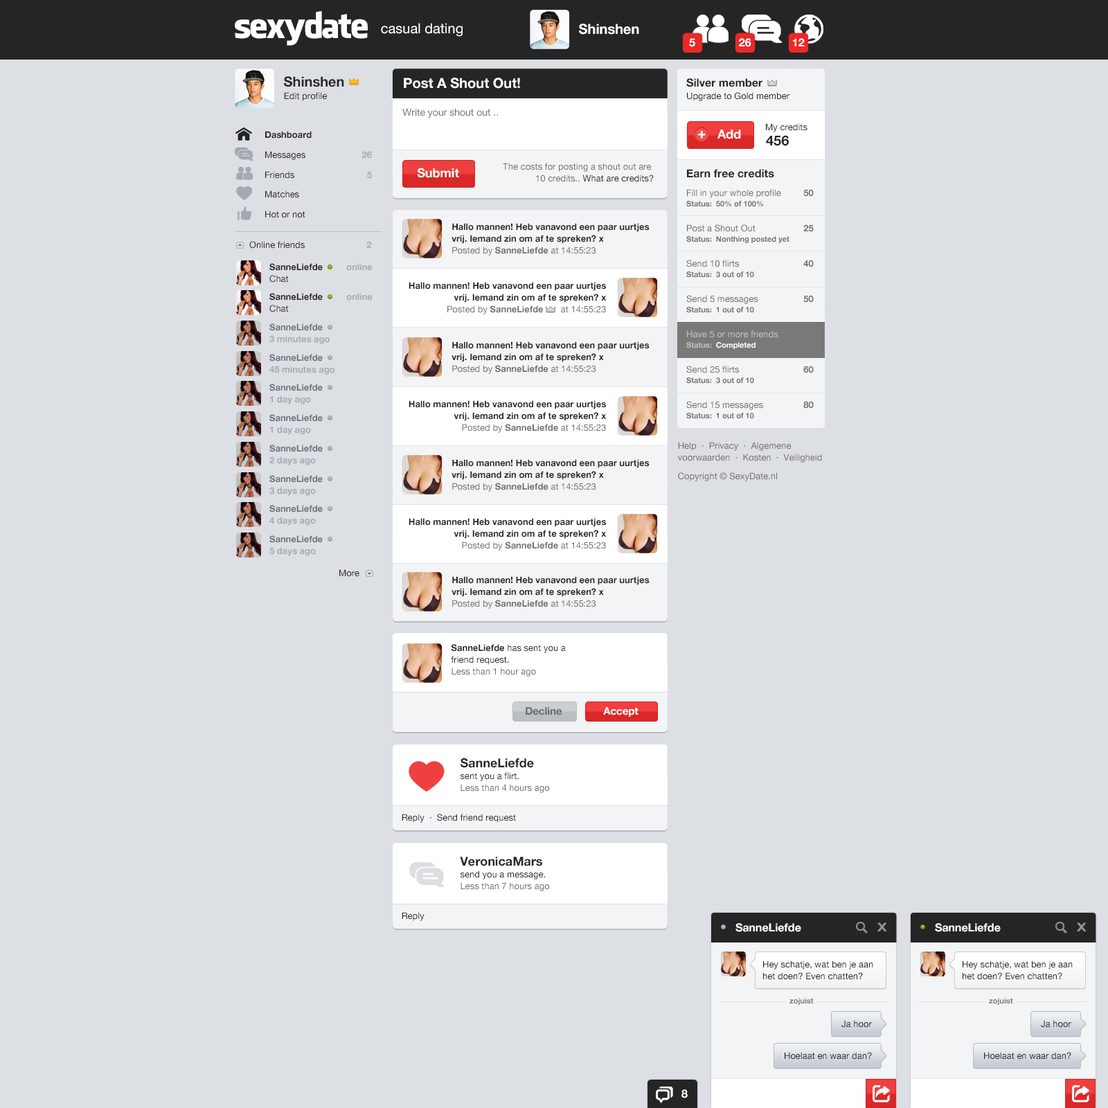
<style>
.page{position:relative;width:1108px;height:1108px;background:#dcdfe3}
.page>*{position:absolute;margin:0}
.t1{font:34.6px "FacebookLetterFaces";letter-spacing:-0.05em;color:#ffffff}
.t2{font:13.8px "HelveticaNeue";color:#ffffff}
.t3{font:13.8px "HelveticaNeue-Bold";color:#ffffff}
.t4{font:11.1px "HelveticaNeue-Bold";color:#ffffff}
.t5{font:13.8px "HelveticaNeue-Bold";color:#252525}
.t6{font:11.1px "HelveticaNeue-Bold";color:#252525}
.t7{font:9px "HelveticaNeue";color:#252525}
.t8{font:9.7px "HelveticaNeue";color:#707070}
.t9{font:9px/20px "HelveticaNeue";color:#252525}
.t10{font:9px/20px "HelveticaNeue-Bold";color:#252525}
.t11{font:13.2px "HelveticaNeue-Bold";color:#ffffff;font-weight:bold}
.t12{font:12.5px "HelveticaNeue-Bold";color:#ffffff}
.t13{font:9px/20px "HelveticaNeue-Bold";color:#a5aab2}
.t14{font:9px/11.8px "HelveticaNeue";color:#707070}
.t15{font:9px/11.8px "HelveticaNeue";color:#252525}
.t16{font:7.6px/10.4px "HelveticaNeue-Bold";color:#707070}
.t17{font:9px/17.3px "HelveticaNeue";color:#707070}
.t18{font:9px/17.3px "HelveticaNeue-Bold";color:#707070}
.t19{font:9px/24.9px "HelveticaNeue";color:#707070}
.t20{font:9px/24.9px "HelveticaNeue-Bold";color:#707070}
.t21{font:9px/24.9px "HelveticaNeue";color:#c3c1c1}
.t22{font:7.6px/10.4px "HelveticaNeue-Bold";color:#c3c1c1}
.t23{font:7.6px/10.4px "HelveticaNeue-Bold";color:#ffffff}
.t24{font:9px/11.8px "HelveticaNeue-Bold";color:#252525}
.t25{font:9px/11.8px "HelveticaNeue-Bold";color:#707070}
.t26{font:9px "HelveticaNeue-Bold";color:#a5aab2}
.t27{font:9px/11.8px "HelveticaNeue-Bold";color:#a5aab2}
.t28{font:9px/11.8px "HelveticaNeue-Bold";color:#6d727b}
.t29{font:9px/18.7px "HelveticaNeue";color:#707070}
.t30{font:10.4px "HelveticaNeue-Bold";color:#686868}
.t31{font:10.4px "HelveticaNeue-Bold";color:#ffffff}
.t32{font:12.5px/11.8px "HelveticaNeue-Bold";color:#252525}
.t33{font:12.5px "Days";color:#929292}
.t34{font:7.6px "HelveticaNeue-Bold";color:#797979}
</style>
<div class="page">
<p class="t1" style="left:235px;top:11px;width:133px;height:35px">sexydate</p>
<p class="t2" style="left:381px;top:23px;width:81px;height:14px">casual dating</p>
<p class="t3" style="left:579px;top:24px;width:60px;height:11px">Shinshen</p>
<p class="t4" style="left:689px;top:38px;width:6px;height:9px">5</p>
<p class="t4" style="left:739px;top:38px;width:12px;height:9px">26</p>
<p class="t4" style="left:793px;top:38px;width:11px;height:8px">12</p>
<p class="t5" style="left:284px;top:76px;width:60px;height:11px">Shinshen</p>
<p class="t3" style="left:404px;top:78px;width:116px;height:11px">Post A Shout Out!</p>
<p class="t6" style="left:686px;top:78px;width:76px;height:9px">Silver member</p>
<p class="t7" style="left:284px;top:92px;width:43px;height:9px">Edit profile</p>
<p class="t7" style="left:687px;top:92px;width:102px;height:9px">Upgrade to Gold member</p>
<p class="t8" style="left:402px;top:109px;width:96px;height:9px">Write your shout out ..</p>
<p class="t7" style="left:766px;top:123px;width:41px;height:9px">My credits</p>
<p class="t9" style="left:265px;top:131px;width:47px;height:87px"><span class="t10">Dashboard<br></span>Messages<br>Friends<br>Matches<br>Hot or not</p>
<p class="t11" style="left:698px;top:131px;width:7px;height:7px">+</p>
<p class="t12" style="left:717px;top:129px;width:24px;height:10px">Add</p>
<p class="t5" style="left:766px;top:135px;width:23px;height:11px">456</p>
<p class="t13" style="left:362px;top:151px;width:10px;height:28px;text-align:right">26<br>5</p>
<p class="t12" style="left:417px;top:168px;width:42px;height:10px">Submit</p>
<p class="t14" style="left:503px;top:163px;width:151px;height:19px;text-align:right">The costs for posting a shout out are <br>10 credits.. <span class="t15">What are credits?</span></p>
<p class="t6" style="left:687px;top:169px;width:87px;height:9px">Earn free credits</p>
<p class="t16" style="left:686px;top:189px;width:127px;height:230px"><span class="t17">Fill in your whole profile        </span><span class="t18">50<br></span>Status:  50% of 100%<br><span class="t19">Post a Shout Out         </span><span class="t20">25<br></span>Status:  Nonthing posted yet<br><span class="t19">Send 10 flirts         </span><span class="t20">40<br></span>Status:  3 out of 10<br><span class="t19">Send 5 messages         </span><span class="t20">50<br></span>Status:  1 out of 10<br><span class="t21">Have 5 or more friends    <br></span><span class="t22">Status:  </span><span class="t23">Completed<br></span><span class="t19">Send 25 flirts         </span><span class="t20">60<br></span>Status:  3 out of 10<br><span class="t19">Send 15 messages        </span><span class="t20">80<br></span>Status:  1 out of 10</p>
<p class="t24" style="left:451px;top:223px;width:198px;height:32px">Hallo mannen! Heb vanavond een paar uurtjes<br>vrij. Iemand zin om af te spreken? x<br><span class="t14">Posted by </span><span class="t25">SanneLiefde</span><span class="t14"> at 14:55:23</span></p>
<p class="t7" style="left:249px;top:241px;width:123px;height:8px">Online friends      <span class="t26">2</span></p>
<p class="t24" style="left:269px;top:263px;width:103px;height:19px">SanneLiefde          <span class="t27">online<br></span><span class="t15">Chat</span></p>
<p class="t24" style="left:408px;top:282px;width:198px;height:32px;text-align:right">Hallo mannen! Heb vanavond een paar uurtjes<br>vrij. Iemand zin om af te spreken? x<br><span class="t14">Posted by </span><span class="t25">SanneLiefde  </span><span class="t14">     at 14:55:23</span></p>
<p class="t24" style="left:269px;top:293px;width:103px;height:19px">SanneLiefde          <span class="t27">online<br></span><span class="t15">Chat</span></p>
<p class="t27" style="left:269px;top:323px;width:61px;height:21px"><span class="t28">SanneLiefde<br></span>3 minutes ago</p>
<p class="t24" style="left:451px;top:341px;width:198px;height:33px">Hallo mannen! Heb vanavond een paar uurtjes<br>vrij. Iemand zin om af te spreken? x<br><span class="t14">Posted by </span><span class="t25">SanneLiefde</span><span class="t14"> at 14:55:23</span></p>
<p class="t27" style="left:269px;top:354px;width:66px;height:21px"><span class="t28">SanneLiefde<br></span>45 minutes ago</p>
<p class="t28" style="left:269px;top:384px;width:54px;height:20px">SanneLiefde<br><span class="t27">1 day ago</span></p>
<p class="t24" style="left:408px;top:400px;width:198px;height:33px;text-align:right">Hallo mannen! Heb vanavond een paar uurtjes<br>vrij. Iemand zin om af te spreken? x<br><span class="t14">Posted by </span><span class="t25">SanneLiefde</span><span class="t14"> at 14:55:23</span></p>
<p class="t28" style="left:269px;top:414px;width:54px;height:21px">SanneLiefde<br><span class="t27">1 day ago</span></p>
<p class="t28" style="left:269px;top:444px;width:54px;height:21px">SanneLiefde<br><span class="t27">2 days ago</span></p>
<p class="t14" style="left:678px;top:442px;width:144px;height:39px">Help  ·  Privacy  ·  Algemene<br>voorwaarden  ·  Kosten  ·  Veiligheid<br><span class="t29">Copyright © SexyDate.nl</span></p>
<p class="t24" style="left:451px;top:459px;width:198px;height:33px">Hallo mannen! Heb vanavond een paar uurtjes<br>vrij. Iemand zin om af te spreken? x<br><span class="t14">Posted by </span><span class="t25">SanneLiefde</span><span class="t14"> at 14:55:23</span></p>
<p class="t28" style="left:269px;top:475px;width:54px;height:21px">SanneLiefde<br><span class="t27">3 days ago</span></p>
<p class="t28" style="left:269px;top:505px;width:54px;height:20px">SanneLiefde<br><span class="t27">4 days ago</span></p>
<p class="t24" style="left:408px;top:518px;width:198px;height:32px;text-align:right">Hallo mannen! Heb vanavond een paar uurtjes<br>vrij. Iemand zin om af te spreken? x<br><span class="t14">Posted by </span><span class="t25">SanneLiefde</span><span class="t14"> at 14:55:23</span></p>
<p class="t28" style="left:269px;top:535px;width:54px;height:21px">SanneLiefde<br><span class="t27">5 days ago</span></p>
<p class="t7" style="left:339px;top:569px;width:20px;height:8px">More</p>
<p class="t24" style="left:451px;top:576px;width:198px;height:33px">Hallo mannen! Heb vanavond een paar uurtjes<br>vrij. Iemand zin om af te spreken? x<br><span class="t14">Posted by </span><span class="t25">SanneLiefde</span><span class="t14"> at 14:55:23</span></p>
<p class="t15" style="left:451px;top:644px;width:115px;height:32px"><span class="t24">SanneLiefde </span>has sent you a<br>friend request.<br><span class="t14">Less than 1 hour ago</span></p>
<p class="t30" style="left:525px;top:707px;width:37px;height:8px">Decline</p>
<p class="t31" style="left:603px;top:707px;width:35px;height:10px">Accept</p>
<p class="t14" style="left:460px;top:757px;width:90px;height:36px"><span class="t32">SanneLiefde <br></span><span class="t15">sent you a flirt.<br></span>Less than 4 hours ago</p>
<p class="t7" style="left:402px;top:813px;width:114px;height:9px">Reply  ·  Send friend request</p>
<p class="t14" style="left:460px;top:856px;width:90px;height:35px"><span class="t32">VeronicaMars <br></span><span class="t15">send you a message.<br></span>Less than 7 hours ago</p>
<p class="t7" style="left:402px;top:912px;width:22px;height:9px">Reply</p>
<p class="t4" style="left:735px;top:923px;width:66px;height:9px">SanneLiefde</p>
<p class="t33" style="left:877px;top:922px;width:10px;height:9px">X</p>
<p class="t4" style="left:935px;top:923px;width:65px;height:9px">SanneLiefde</p>
<p class="t33" style="left:1077px;top:922px;width:9px;height:9px">X</p>
<p class="t15" style="left:763px;top:960px;width:110px;height:20px">Hey schatje, wat ben je aan <br>het doen? Even chatten?</p>
<p class="t15" style="left:962px;top:960px;width:110px;height:20px">Hey schatje, wat ben je aan <br>het doen? Even chatten?</p>
<p class="t34" style="left:789px;top:998px;width:24px;height:7px">zojuist</p>
<p class="t34" style="left:989px;top:998px;width:24px;height:7px">zojuist</p>
<p class="t7" style="left:841px;top:1020px;width:31px;height:7px">Ja hoor</p>
<p class="t7" style="left:1041px;top:1020px;width:30px;height:7px">Ja hoor</p>
<p class="t7" style="left:784px;top:1052px;width:88px;height:7px">Hoelaat en waar dan?</p>
<p class="t7" style="left:984px;top:1052px;width:87px;height:7px">Hoelaat en waar dan?</p>
<p class="t4" style="left:681px;top:1089px;width:6px;height:9px">8</p>
</div>
